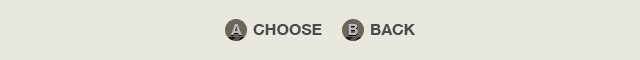
<style>
.page{position:relative;width:640px;height:60px;background:#e8e8de}
.page>*{position:absolute;margin:0}
.t1{font:16px "HelveticaNeue-Bold";color:#4b4b4b}
</style>
<div class="page">
<p class="t1" style="left:253px;top:24px;width:69px;height:11px">CHOOSE</p>
<p class="t1" style="left:371px;top:24px;width:44px;height:11px">BACK</p>
</div>
